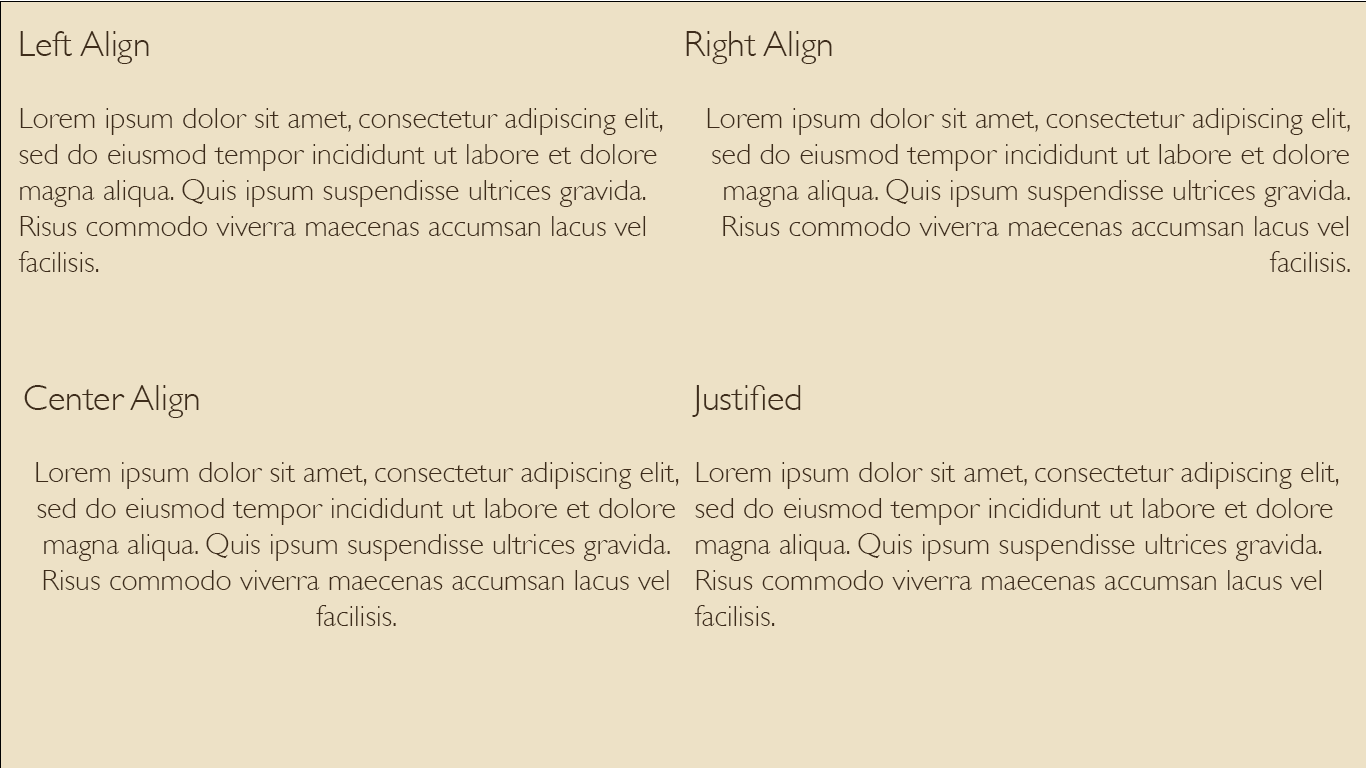
<style>
.page{position:relative;width:1366px;height:768px;background:#ede1c6}
.page>*{position:absolute;margin:0}
.t1{font:30px "GillSans-Light";color:#3e2c1a}
.t2{font:36px "GillSans-Light";color:#3e2c1a}
</style>
<div class="page">
<p class="t1" style="left:18px;top:31px;width:645px;height:241px"><span class="t2">Left Align<br></span><br>Lorem ipsum dolor sit amet, consectetur adipiscing elit, sed do eiusmod tempor incididunt ut labore et dolore magna aliqua. Quis ipsum suspendisse ultrices gravida. Risus commodo viverra maecenas accumsan lacus vel facilisis.</p>
<p class="t1" style="left:686px;top:31px;width:664px;height:241px"><span class="t2">Right Align<br></span><br>Lorem ipsum dolor sit amet, consectetur adipiscing elit, sed do eiusmod tempor incididunt ut labore et dolore magna aliqua. Quis ipsum suspendisse ultrices gravida. Risus commodo viverra maecenas accumsan lacus vel facilisis.</p>
<p class="t1" style="left:24px;top:385px;width:655px;height:241px"><span class="t2">Center Align<br></span><br>Lorem ipsum dolor sit amet, consectetur adipiscing elit, sed do eiusmod tempor incididunt ut labore et dolore magna aliqua. Quis ipsum suspendisse ultrices gravida. Risus commodo viverra maecenas accumsan lacus vel facilisis.</p>
<p class="t1" style="left:692px;top:385px;width:647px;height:241px"><span class="t2">Justified<br></span><br>Lorem ipsum dolor sit amet, consectetur adipiscing elit, sed do eiusmod tempor incididunt ut labore et dolore magna aliqua. Quis ipsum suspendisse ultrices gravida. Risus commodo viverra maecenas accumsan lacus vel facilisis.</p>
</div>
